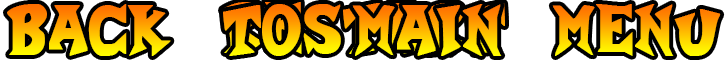
<style>
.page{position:relative;width:725px;height:60px;background:#ffffff}
.page>*{position:absolute;margin:0}
.t1{font:100px "Crash-a-Like"}
</style>
<div class="page">
<p class="t1" style="left:7px;top:4px;width:714px;height:52px">Back to main menu</p>
</div>
